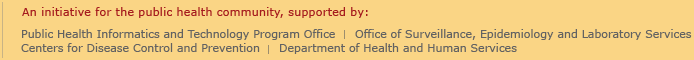
<style>
.page{position:relative;width:694px;height:60px;background:#fad585}
.page>*{position:absolute;margin:0}
.t1{font:11px "Verdana";letter-spacing:0.025em;color:#a51b1e}
.t2{font:11px "Verdana";color:#626262}
</style>
<div class="page">
<p class="t1" style="left:22px;top:7px;width:346px;height:11px">An initiative for the public health community, supported by:</p>
<p class="t2" style="left:22px;top:29px;width:313px;height:11px">Public Health Informatics and Technology Program Office</p>
<p class="t2" style="left:355px;top:29px;width:337px;height:11px">Office of Surveillance, Epidemiology and Laboratory Services</p>
<p class="t2" style="left:21px;top:43px;width:239px;height:9px">Centers for Disease Control and Prevention</p>
<p class="t2" style="left:280px;top:43px;width:237px;height:11px">Department of Health and Human Services</p>
</div>
